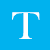
<style>
.page{position:relative;width:50px;height:50px;background:#00b2ee}
.page>*{position:absolute;margin:0}
.t1{font:40px "BaskOldFace";letter-spacing:0.175em;color:#ffffff}
</style>
<div class="page">
<p class="t1" style="left:12px;top:12px;width:28px;height:27px">T</p>
</div>
